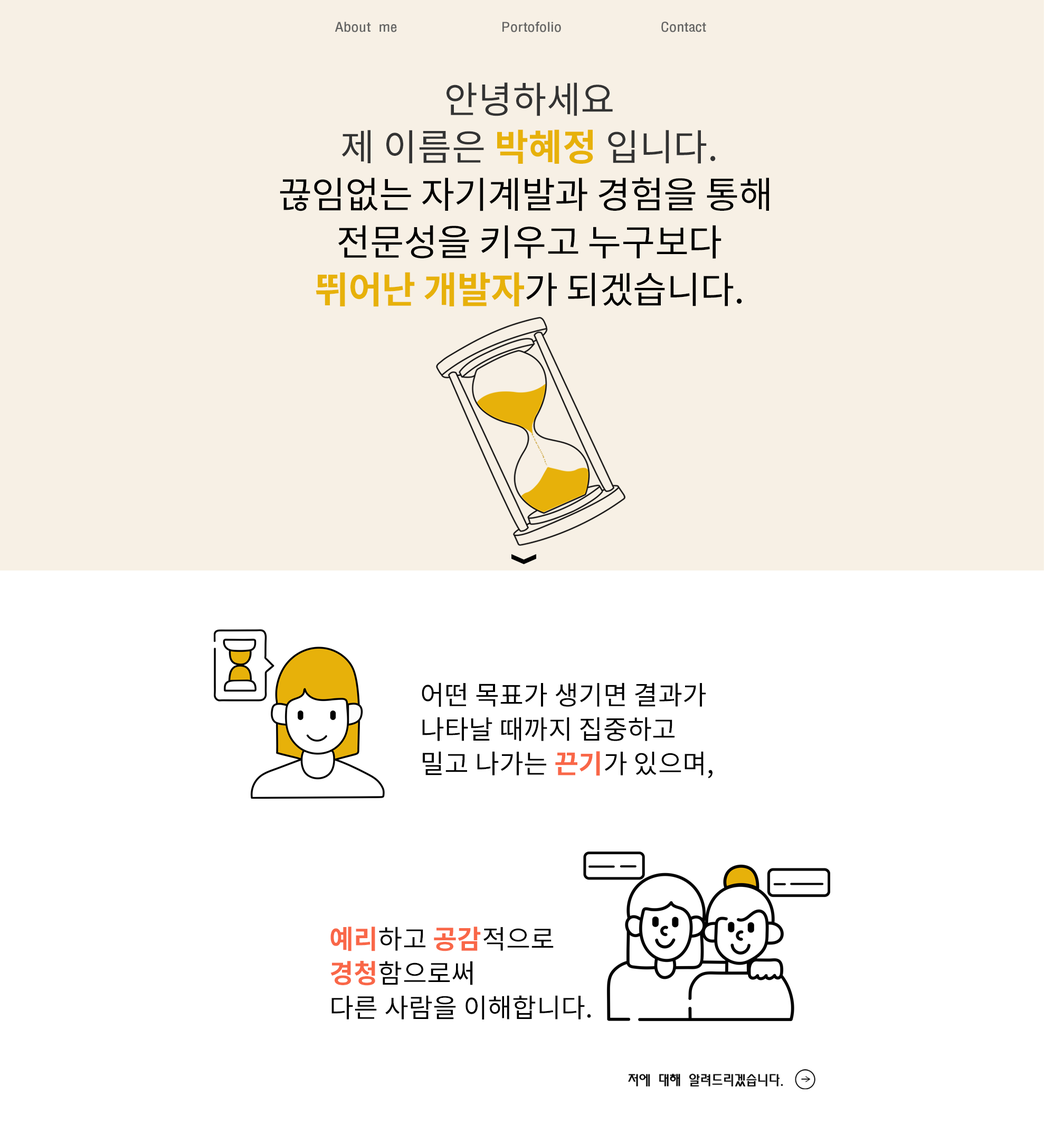
<style>
.page{position:relative;width:1045px;height:1141px;background:#ffffff}
.page>*{position:absolute;margin:0}
.t1{font:12.1px "MoeumTR-HM";letter-spacing:-0.01em;color:#636362;scale:1.18 1}
.t2{font:37px/47.5px "NotoSansKR-Regular";letter-spacing:-0.01em;color:#000000;text-transform:uppercase}
.t3{font:37px/47.5px "NotoSansKR-Regular";letter-spacing:0.005em;color:#333333}
.t4{font:37px/47.5px "NotoSansKR-Bold";letter-spacing:0.005em;color:#e7b10a}
.t5{font:37px/47.5px "NotoSansKR-Bold";letter-spacing:-0.01em;color:#e7b10a;text-transform:uppercase}
.t6{font:26.4px/34.3px "NotoSansKR-Regular";letter-spacing:0.005em;color:#000000}
.t7{font:26.4px/34.3px "NotoSansKR-Bold";letter-spacing:0.005em;color:#f96748}
</style>
<div class="page">
<p class="t1" style="left:335px;top:22px;width:62px;height:10px">About me</p>
<p class="t1" style="left:503px;top:22px;width:58px;height:10px">Portofolio</p>
<p class="t1" style="left:662px;top:22px;width:45px;height:10px">Contact</p>
<p class="t2" style="left:280px;top:82px;width:489px;height:225px;text-align:center"><span class="t3">안녕하세요<br>제 이름은 </span><span class="t4">박혜정</span><span class="t3"> 입니다.</span><br>끊임없는 자기계발과 경험을 통해 <br>전문성을 키우고 누구보다<br> <span class="t5">뛰어난 개발자</span>가 되겠습니다.</p>
<p class="t6" style="left:422px;top:682px;width:291px;height:96px">어떤 목표가 생기면 결과가 <br>나타날 때까지 집중하고 <br>밀고 나가는 <span class="t7">끈기</span>가 있으며,</p>
<p class="t6" style="left:331px;top:926px;width:260px;height:93px"><span class="t7">예리</span>하고 <span class="t7">공감</span>적으로 <br><span class="t7">경청</span>함으로써 <br>다른 사람을 이해합니다.</p>
</div>
